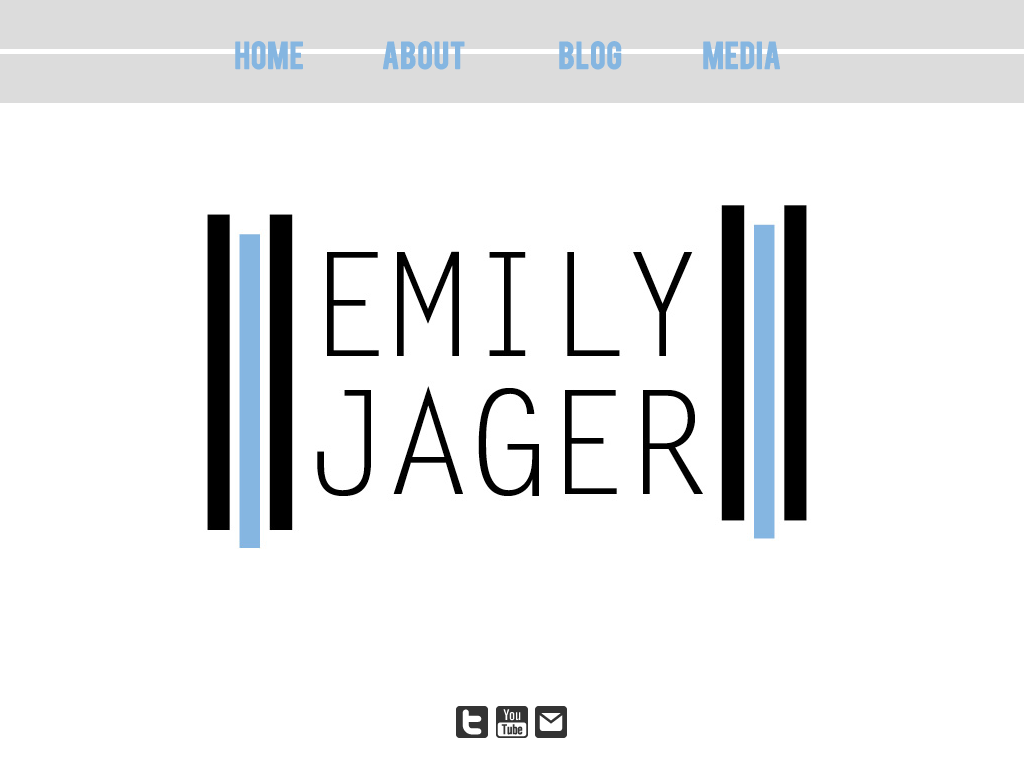
<style>
.page{position:relative;width:1024px;height:768px;background:#ffffff}
.page>*{position:absolute;margin:0}
.t1{font:30px "Bebas";color:#85b6e1;font-weight:bold}
</style>
<div class="page">
<p class="t1" style="left:235px;top:41px;width:545px;height:29px">HOME    ABOUT   BLOG   MEDIA</p>
</div>
